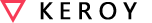
<style>
.page{position:relative;width:152px;height:23px;background:#ffffff}
.page>*{position:absolute;margin:0}
.t1{font:24px "MicrosoftPhagsPa";color:#000000;font-weight:bold}
</style>
<div class="page">
<p class="t1" style="left:40px;top:2px;width:13px;height:18px">K</p>
<p class="t1" style="left:60px;top:2px;width:11px;height:18px">E</p>
<p class="t1" style="left:79px;top:2px;width:13px;height:18px">R</p>
<p class="t1" style="left:99px;top:2px;width:18px;height:18px">O</p>
<p class="t1" style="left:123px;top:2px;width:14px;height:18px">Y</p>
</div>
